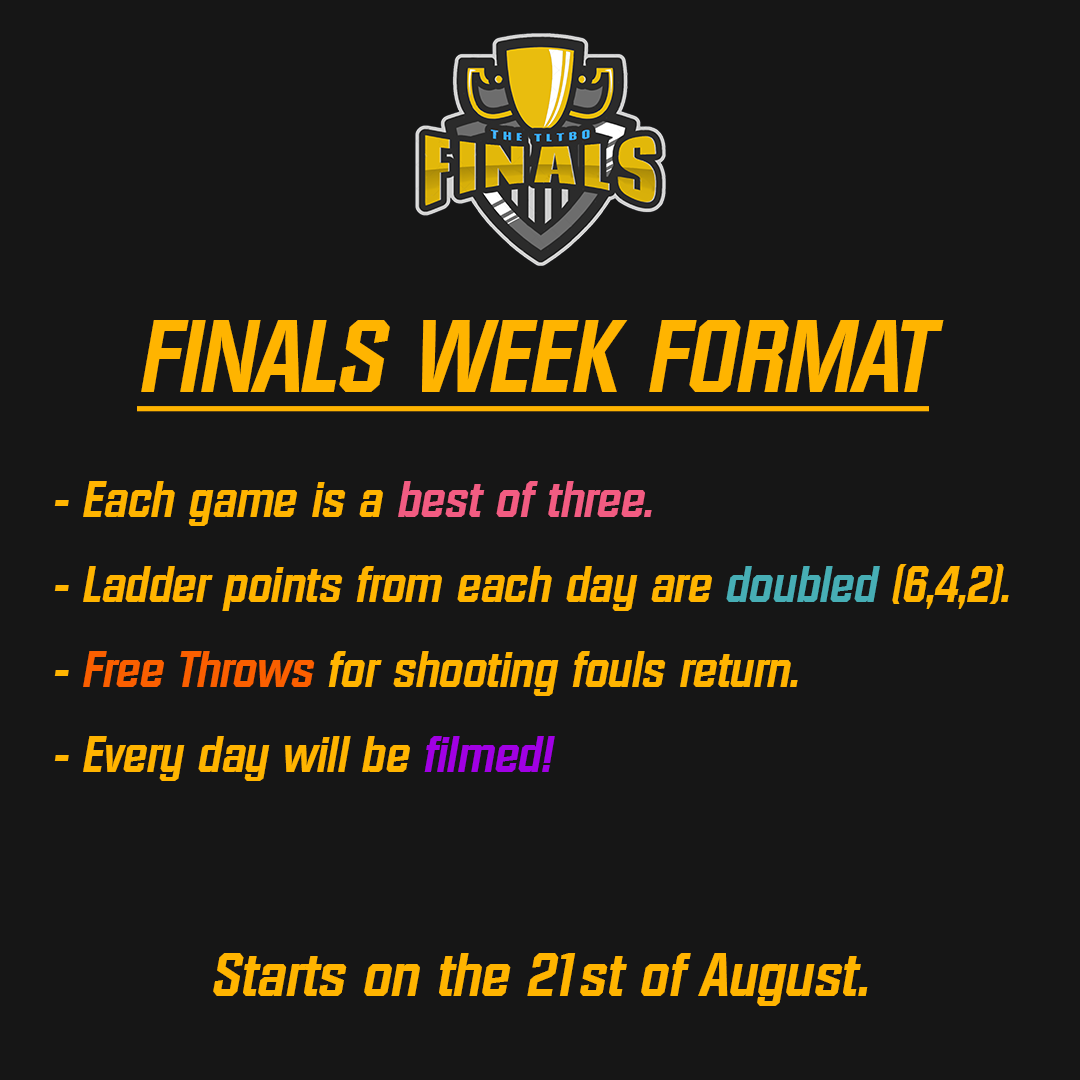
<style>
.page{position:relative;width:1080px;height:1080px;background:#161616}
.page>*{position:absolute;margin:0}
.t1{font:100px "Diamante-Serial-BoldItalic";color:#ffb400;text-decoration:underline}
.t2{font:50px/85px "Diamante-Serial-BoldItalic";color:#ffb400}
.t3{font:50px/85px "Diamante-Serial-BoldItalic";color:#f25c82}
.t4{font:50px/85px "Diamante-Serial-BoldItalic";color:#47aeb5}
.t5{font:50px/85px "Diamante-Serial-BoldItalic";color:#fa5f00}
.t6{font:50px/85px "Diamante-Serial-BoldItalic";color:#a100e4}
.t7{font:60px "Diamante-Serial-BoldItalic";color:#ffb400}
</style>
<div class="page">
<p class="t1" style="left:137px;top:320px;width:807px;height:92px">FINALS WEEK FORMAT</p>
<p class="t2" style="left:54px;top:481px;width:955px;height:300px">- Each game is a <span class="t3">best of three.<br></span>- Ladder points from each day are <span class="t4">doubled </span>(6,4,2).<br>- <span class="t5">Free Throws</span> for shooting fouls return.<br>- Every day will be <span class="t6">filmed!</span></p>
<p class="t7" style="left:213px;top:953px;width:655px;height:53px">Starts on the 21st of August.</p>
</div>
